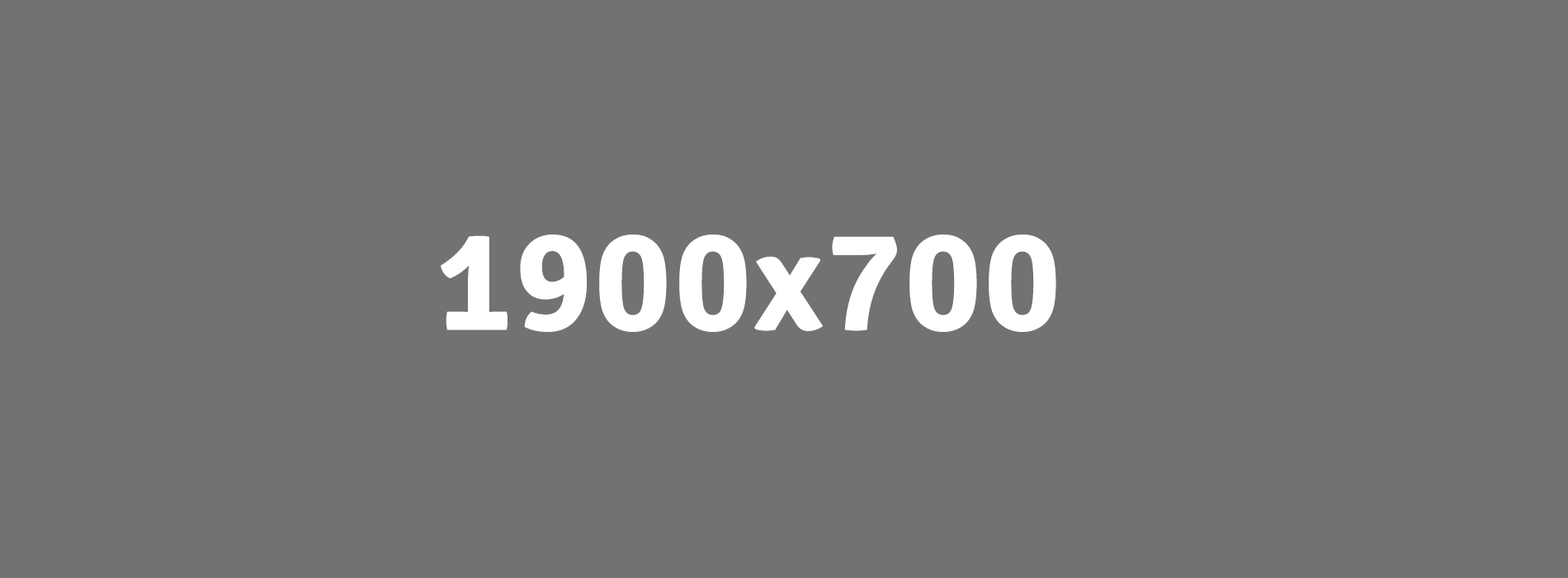
<style>
.page{position:relative;width:1568px;height:578px;background:#727272}
.page>*{position:absolute;margin:0}
.t1{font:142.5px "SignikaNegative-Bold";color:#ffffff;font-weight:bold}
</style>
<div class="page">
<p class="t1" style="left:441px;top:234px;width:615px;height:98px">1900x700</p>
</div>
